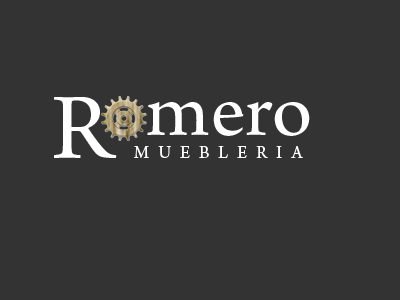
<style>
.page{position:relative;width:400px;height:300px;background:#333333}
.page>*{position:absolute;margin:0}
.t1{font:100px "ArnoPro-Regular";color:#ffffff}
.t2{font:81.3px "ArnoPro-Regular";color:#ffffff;scale:1.04 1}
.t3{font:18px "ArnoPro-Regular";letter-spacing:0.5em;color:#ffffff}
</style>
<div class="page">
<p class="t1" style="left:54px;top:97px;width:63px;height:61px">R</p>
<p class="t2" style="left:147px;top:102px;width:163px;height:34px">mero</p>
<p class="t3" style="left:134px;top:145px;width:169px;height:13px">MUEBLERIA</p>
</div>
